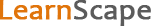
<style>
.page{position:relative;width:152px;height:26px;background:#ffffff}
.page>*{position:absolute;margin:0}
.t1{font:30px "Candara";color:#e0740b;font-weight:bold}
.t2{font:30px "Candara";color:#5b5b5b;font-weight:bold}
</style>
<div class="page">
<p class="t1" style="left:0px;top:0px;width:151px;height:26px">Learn<span class="t2">Scape</span></p>
</div>
